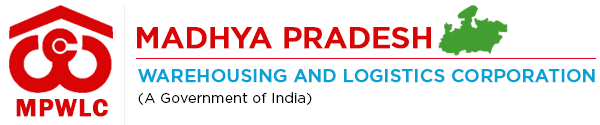
<style>
.page{position:relative;width:600px;height:125px;background:#ffffff}
.page>*{position:absolute;margin:0}
.t1{font:30px "Gotham-Medium";letter-spacing:-0.025em;color:#d90406;text-transform:uppercase;font-weight:bold}
.t2{font:18px "Gotham-Medium";letter-spacing:-0.005em;color:#07a2d5;text-transform:uppercase;font-weight:bold}
.t3{font:25px "FranklinGothic-Demi";letter-spacing:0.035em;color:#d90406;text-transform:uppercase;font-weight:bold}
.t4{font:14px "Gotham-Book";letter-spacing:0.015em;color:#000000}
</style>
<div class="page">
<p class="t1" style="left:137px;top:27px;width:294px;height:22px">MADHYA PRADESH</p>
<p class="t2" style="left:138px;top:69px;width:457px;height:14px">WAREHOUSing AND LOGISTICS CORPORATION</p>
<p class="t3" style="left:16px;top:99px;width:92px;height:18px">mpwlc</p>
<p class="t4" style="left:138px;top:92px;width:174px;height:13px">(A Government of India)</p>
</div>
